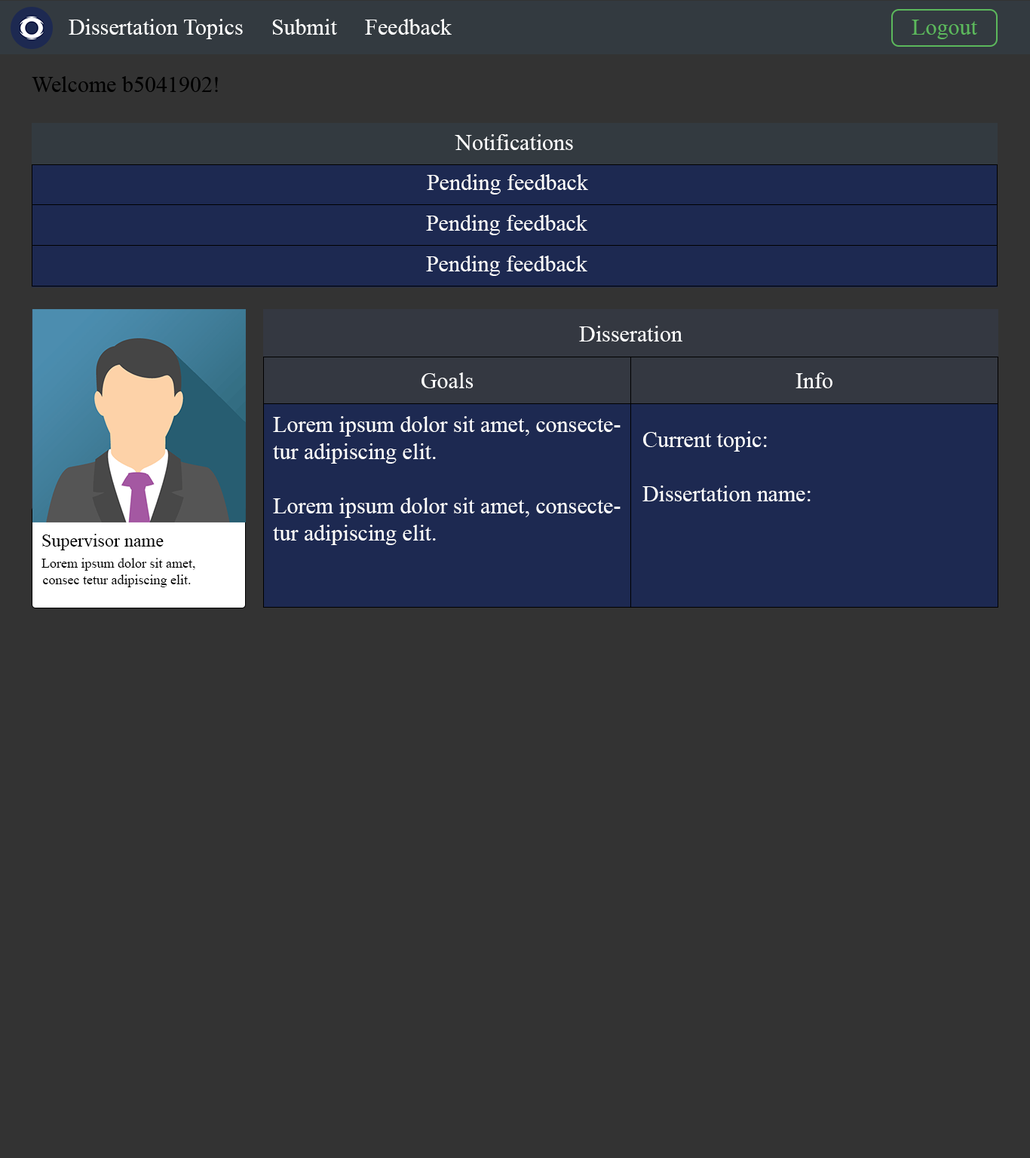
<style>
.page{position:relative;width:1030px;height:1158px;background:#333333}
.page>*{position:absolute;margin:0}
.t1{font:22.6px "TimesNewRomanPSMT";color:#ffffff}
.t2{font:22.6px "TimesNewRomanPSMT";color:#5cb85c}
.t3{font:22.6px "TimesNewRomanPSMT";color:#000000}
.t4{font:13.6px "TimesNewRomanPSMT";color:#000000}
.t5{font:18.1px "TimesNewRomanPSMT";color:#000000}
</style>
<div class="page">
<p class="t1" style="left:69px;top:19px;width:383px;height:20px">Dissertation Topics     Submit     Feedback</p>
<p class="t2" style="left:911px;top:20px;width:66px;height:19px">Logout</p>
<p class="t3" style="left:32px;top:76px;width:186px;height:16px">Welcome b5041902!</p>
<p class="t1" style="left:455px;top:134px;width:118px;height:17px">Notifications</p>
<p class="t1" style="left:427px;top:174px;width:161px;height:20px">Pending feedback</p>
<p class="t1" style="left:426px;top:215px;width:161px;height:20px">Pending feedback</p>
<p class="t1" style="left:426px;top:256px;width:161px;height:20px">Pending feedback</p>
<p class="t1" style="left:579px;top:326px;width:103px;height:16px">Disseration</p>
<p class="t1" style="left:421px;top:372px;width:52px;height:16px">Goals</p>
<p class="t1" style="left:795px;top:372px;width:37px;height:16px">Info</p>
<p class="t1" style="left:273px;top:416px;width:347px;height:129px">Lorem ipsum dolor sit amet, consectetur adipiscing elit.<br><br>Lorem ipsum dolor sit amet, consectetur adipiscing elit.</p>
<p class="t1" style="left:642px;top:431px;width:168px;height:70px">Current topic:<br><br>  Dissertation name:</p>
<p class="t4" style="left:41px;top:534px;width:154px;height:53px"><span class="t5">  Supervisor name<br>  </span>Lorem ipsum dolor sit amet, <br>   consec tetur adipiscing elit.</p>
</div>
